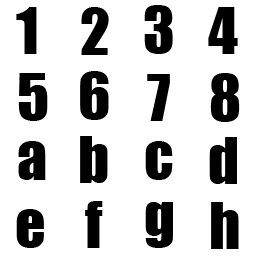
<style>
.page{position:relative;width:256px;height:256px;background:#ffffff}
.page>*{position:absolute;margin:0}
.t1{font:60px "Impact";color:#000000}
</style>
<div class="page">
<p class="t1" style="left:144px;top:5px;width:29px;height:49px">3</p>
<p class="t1" style="left:16px;top:7px;width:21px;height:47px">1</p>
<p class="t1" style="left:81px;top:7px;width:28px;height:48px">2</p>
<p class="t1" style="left:208px;top:7px;width:30px;height:47px">4</p>
<p class="t1" style="left:18px;top:73px;width:30px;height:48px">5</p>
<p class="t1" style="left:80px;top:71px;width:29px;height:49px">6</p>
<p class="t1" style="left:147px;top:74px;width:23px;height:47px">7</p>
<p class="t1" style="left:210px;top:73px;width:30px;height:49px">8</p>
<p class="t1" style="left:80px;top:136px;width:28px;height:47px">b</p>
<p class="t1" style="left:209px;top:137px;width:28px;height:47px">d</p>
<p class="t1" style="left:18px;top:141px;width:28px;height:39px">a</p>
<p class="t1" style="left:145px;top:141px;width:28px;height:39px">c</p>
<p class="t1" style="left:16px;top:209px;width:28px;height:39px">e</p>
<p class="t1" style="left:85px;top:201px;width:18px;height:47px">f</p>
<p class="t1" style="left:145px;top:202px;width:28px;height:46px">g</p>
<p class="t1" style="left:211px;top:202px;width:28px;height:47px">h</p>
</div>
